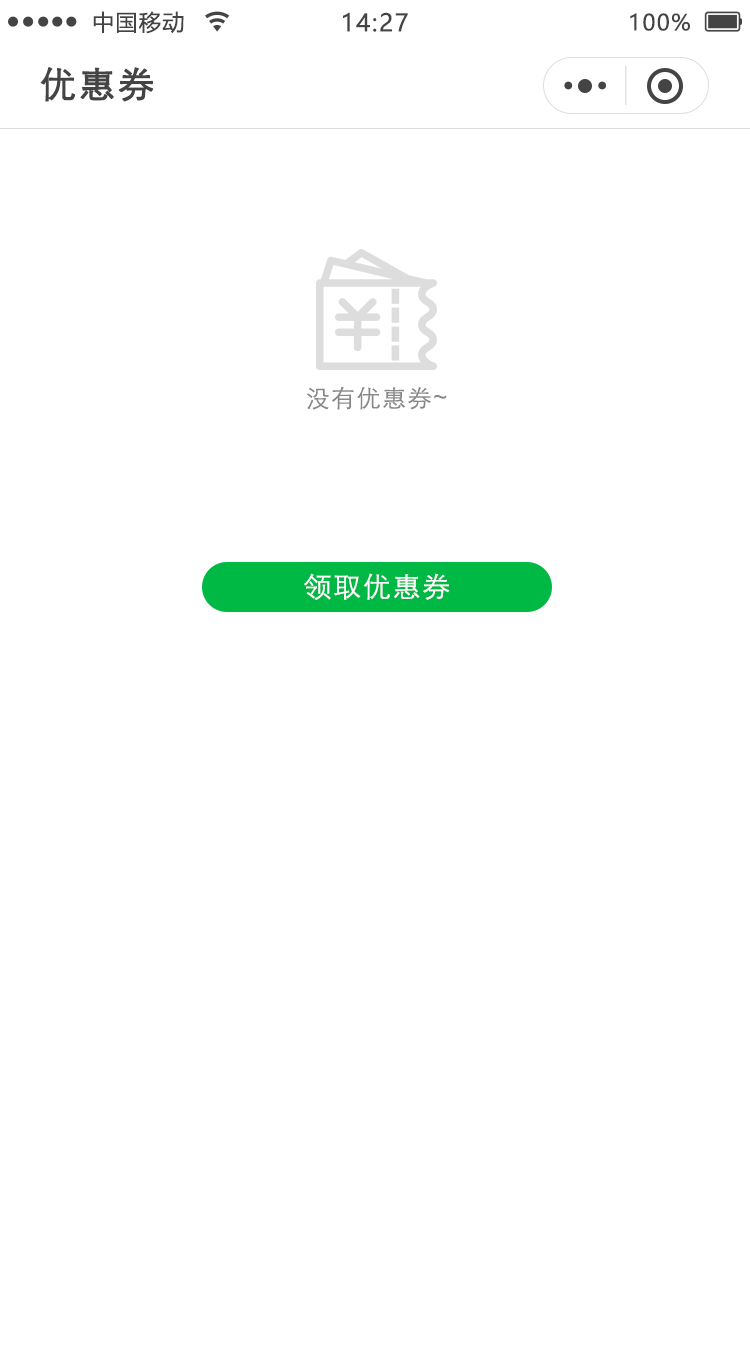
<style>
.page{position:relative;width:750px;height:1347px;background:#ffffff}
.page>*{position:absolute;margin:0}
.t1{font:22px "MicrosoftYaHei";letter-spacing:0.06em;color:#444444}
.t2{font:24px "MicrosoftYaHei";letter-spacing:0.06em;color:#444444}
.t3{font:36px "STXihei";letter-spacing:0.06em;color:#444444;font-weight:bold}
.t4{font:24px "STXihei";letter-spacing:0.06em;color:#888888}
.t5{font:28px "STXihei";letter-spacing:0.06em;color:#ffffff}
</style>
<div class="page">
<p class="t1" style="left:93px;top:11px;width:91px;height:23px">中国移动</p>
<p class="t2" style="left:343px;top:12px;width:65px;height:20px">14:27</p>
<p class="t1" style="left:630px;top:13px;width:60px;height:18px">100%</p>
<p class="t3" style="left:40px;top:67px;width:114px;height:35px">优惠券</p>
<p class="t4" style="left:307px;top:386px;width:140px;height:24px">没有优惠券~</p>
<p class="t5" style="left:304px;top:573px;width:146px;height:27px">领取优惠券</p>
</div>
